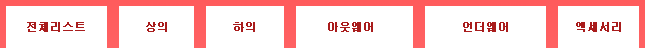
<style>
.page{position:relative;width:645px;height:48px;background:#ffffff}
.page>*{position:absolute;margin:0}
.t1{font:11px "Dotum";color:#a91c1c;font-weight:bold}
.t2{font:11px "Dotum";letter-spacing:-0.025em;color:#a91c1c;font-weight:bold}
</style>
<div class="page">
<p class="t1" style="left:27px;top:22px;width:58px;height:10px">전체리스트</p>
<p class="t2" style="left:146px;top:22px;width:21px;height:10px">상의</p>
<p class="t2" style="left:233px;top:22px;width:22px;height:10px">하의</p>
<p class="t2" style="left:328px;top:22px;width:45px;height:10px">아웃웨어</p>
<p class="t2" style="left:463px;top:22px;width:45px;height:10px">언더웨어</p>
<p class="t2" style="left:576px;top:22px;width:45px;height:10px">엑세서리</p>
</div>
